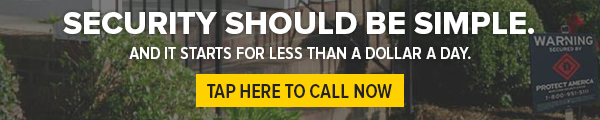
<style>
.page{position:relative;width:600px;height:120px}
.page>*{position:absolute;margin:0}
.t1{font:32px "ProximaNova-Extrabld";color:#ffffff}
.t2{font:18px "ProximaNovaCond-Semibold";color:#ffffff}
.t3{font:20px "ProximaNovaCond-Semibold";color:#222222}
</style>
<div class="page">
<p class="t1" style="left:63px;top:12px;width:471px;height:22px">SECURITY SHOULD BE SIMPLE.</p>
<p class="t2" style="left:129px;top:47px;width:342px;height:12px">AND IT STARTS FOR LESS THAN A DOLLAR A DAY.</p>
<p class="t3" style="left:207px;top:84px;width:185px;height:14px">TAP HERE TO CALL NOW</p>
</div>
